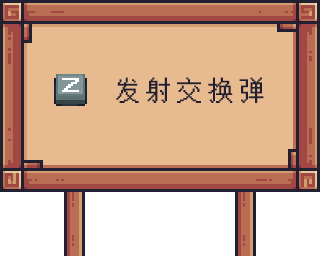
<style>
.page{position:relative;width:320px;height:256px;background:#e7bb8f}
.page>*{position:absolute;margin:0}
.t1{font:25px "FZXS16--GB1-0";letter-spacing:0.22em;color:#211f30;font-weight:bold}
</style>
<div class="page">
<p class="t1" style="left:116px;top:77px;width:148px;height:26px">发射交换弹</p>
</div>
